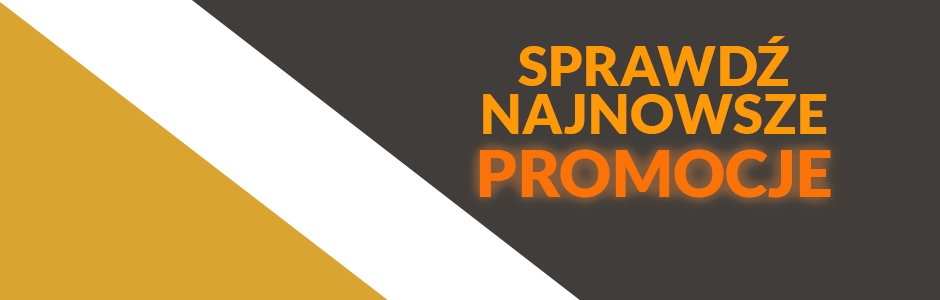
<style>
.page{position:relative;width:940px;height:300px;background:#403d3a}
.page>*{position:absolute;margin:0}
.t1{font:55px/48px "Lato-Black";letter-spacing:0.003em;color:#ff9905}
.t2{font:65px "Lato-Black";letter-spacing:0.003em;color:#fb7306}
</style>
<div class="page">
<p class="t1" style="left:483px;top:36px;width:344px;height:98px;text-align:center">SPRAWDŹ<br>NAJNOWSZE</p>
<p class="t2" style="left:479px;top:149px;width:352px;height:49px">PROMOCJE</p>
</div>
